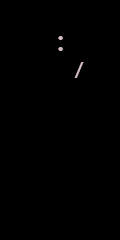
<style>
.page{position:relative;width:120px;height:240px;background:#000000}
.page>*{position:absolute;margin:0}
.t1{font:30px "SegoeUI-Semibold";letter-spacing:0.035em;color:#d2bec2}
.t2{font:20px "SegoeUI-Semibold";letter-spacing:0.035em;color:#d2bec2}
</style>
<div class="page">
<p class="t1" style="left:58px;top:36px;width:5px;height:15px">:</p>
<p class="t2" style="left:74px;top:62px;width:10px;height:16px">/</p>
</div>
